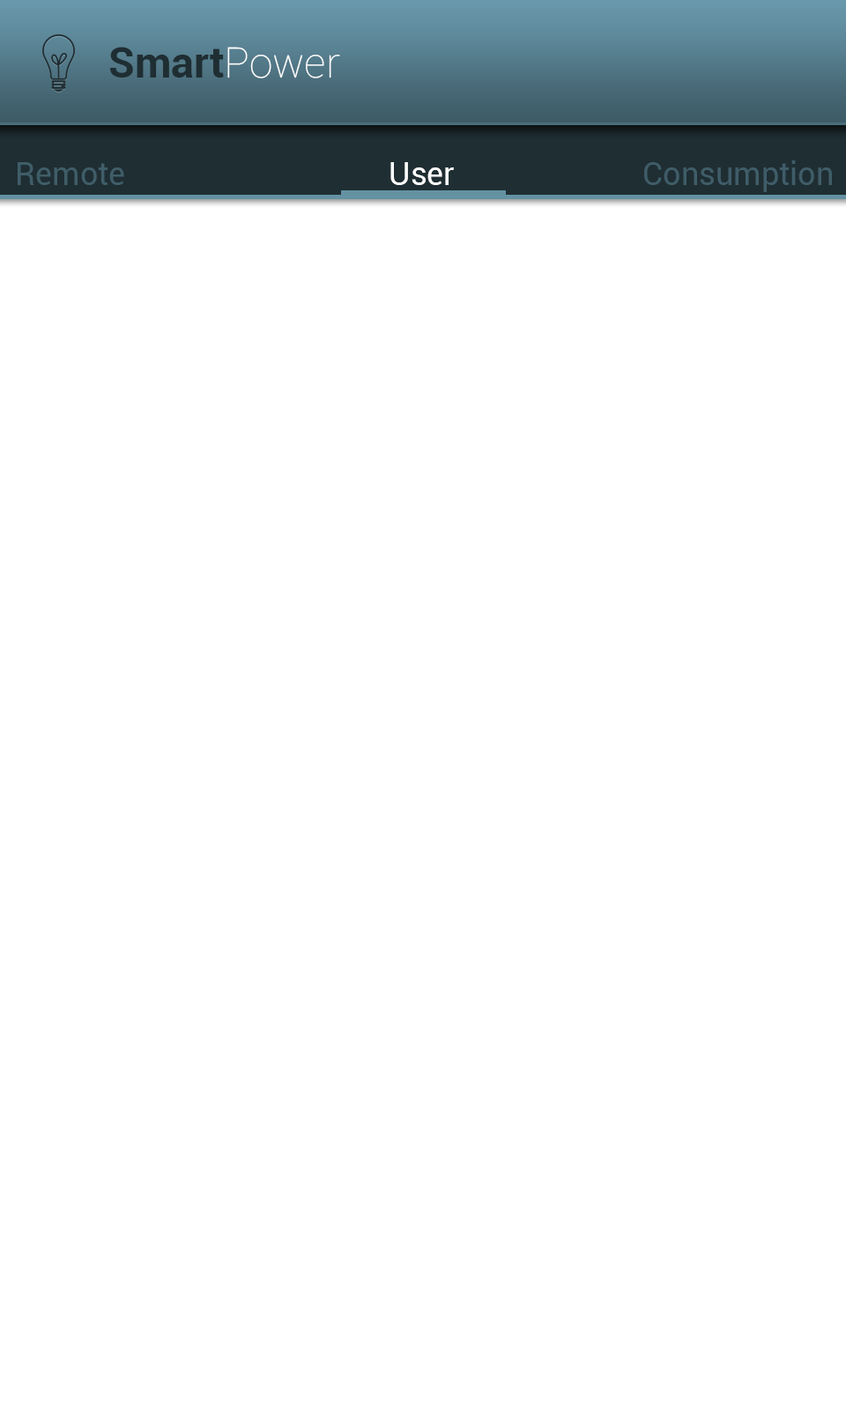
<style>
.page{position:relative;width:846px;height:1410px;background:#ffffff}
.page>*{position:absolute;margin:0}
.t1{font:42.3px "Roboto-Bold";color:#1f2e33}
.t2{font:42.3px "Roboto-Thin";color:#ffffff}
.t3{font:31.7px "Roboto-Regular";color:#3f5d68}
.t4{font:31.7px "Roboto-Regular";color:#ffffff}
</style>
<div class="page">
<p class="t1" style="left:110px;top:47px;width:230px;height:31px">Smart<span class="t2">Power</span></p>
<p class="t3" style="left:644px;top:160px;width:188px;height:32px">Consumption</p>
<p class="t3" style="left:18px;top:162px;width:106px;height:23px">Remote</p>
<p class="t4" style="left:390px;top:162px;width:64px;height:23px">User</p>
</div>
